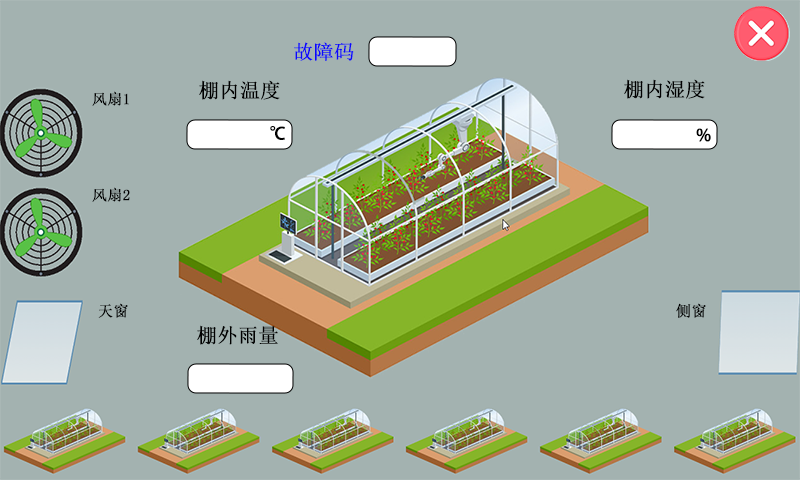
<style>
.page{position:relative;width:800px;height:480px;background:#a3b2b0}
.page>*{position:absolute;margin:0}
.t1{font:20px "SimSun";color:#0c06fc;font-weight:bold}
.t2{font:20px "SimSun";color:#000000;font-weight:bold}
.t3{font:15px "SimSun";color:#000000;font-weight:bold}
</style>
<div class="page">
<p class="t1" style="left:294px;top:42px;width:60px;height:19px">故障码</p>
<p class="t2" style="left:199px;top:80px;width:81px;height:20px">棚内温度</p>
<p class="t2" style="left:624px;top:79px;width:81px;height:20px">棚内湿度</p>
<p class="t3" style="left:92px;top:91px;width:37px;height:15px">风扇1</p>
<p class="t3" style="left:92px;top:187px;width:38px;height:15px">风扇2</p>
<p class="t3" style="left:98px;top:303px;width:30px;height:15px">天窗</p>
<p class="t3" style="left:676px;top:303px;width:30px;height:15px">侧窗</p>
<p class="t2" style="left:197px;top:325px;width:81px;height:20px">棚外雨量</p>
</div>
